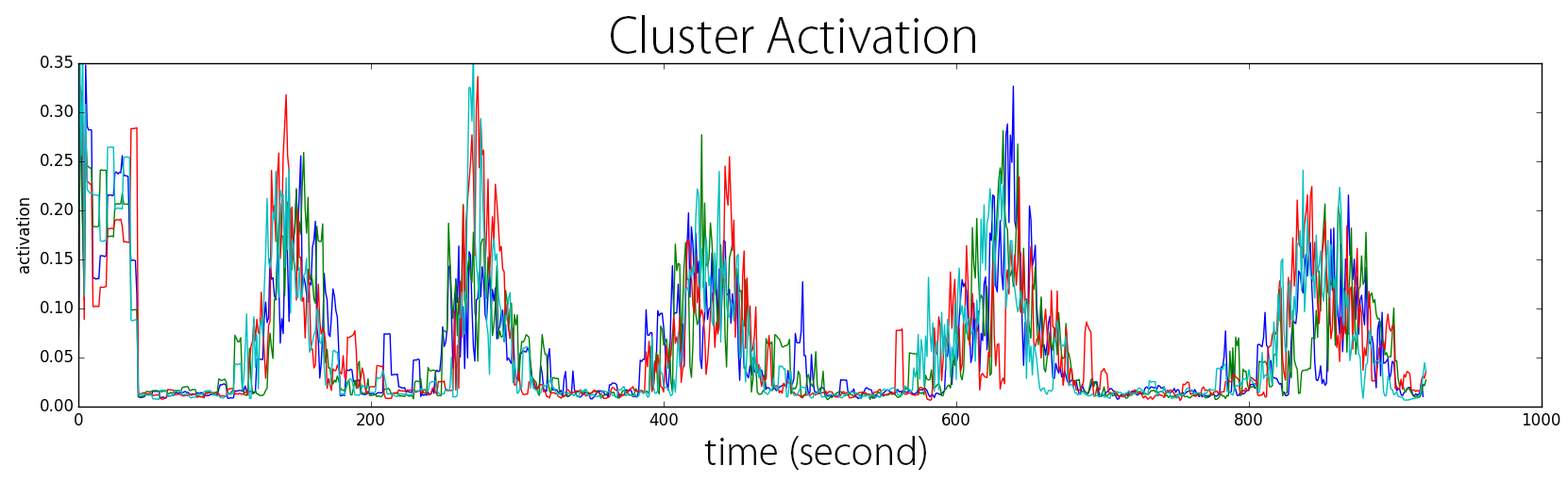
<style>
.page{position:relative;width:1568px;height:483px;background:#ffffff}
.page>*{position:absolute;margin:0}
.t1{font:47.2px "KozGoPro-Light";color:#060606}
.t2{font:36.7px "KozGoPro-Light";color:#060606}
</style>
<div class="page">
<p class="t1" style="left:611px;top:15px;width:364px;height:39px">Cluster Activation</p>
<p class="t2" style="left:704px;top:436px;width:222px;height:35px">time (second)</p>
</div>
